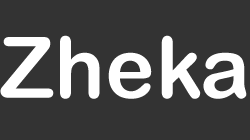
<style>
.page{position:relative;width:250px;height:140px;background:#333333}
.page>*{position:absolute;margin:0}
.t1{font:145.9px "ArialRoundedMTBold";color:#ffffff}
</style>
<div class="page">
<p class="t1" style="left:0px;top:35px;width:247px;height:64px">Zheka</p>
</div>
